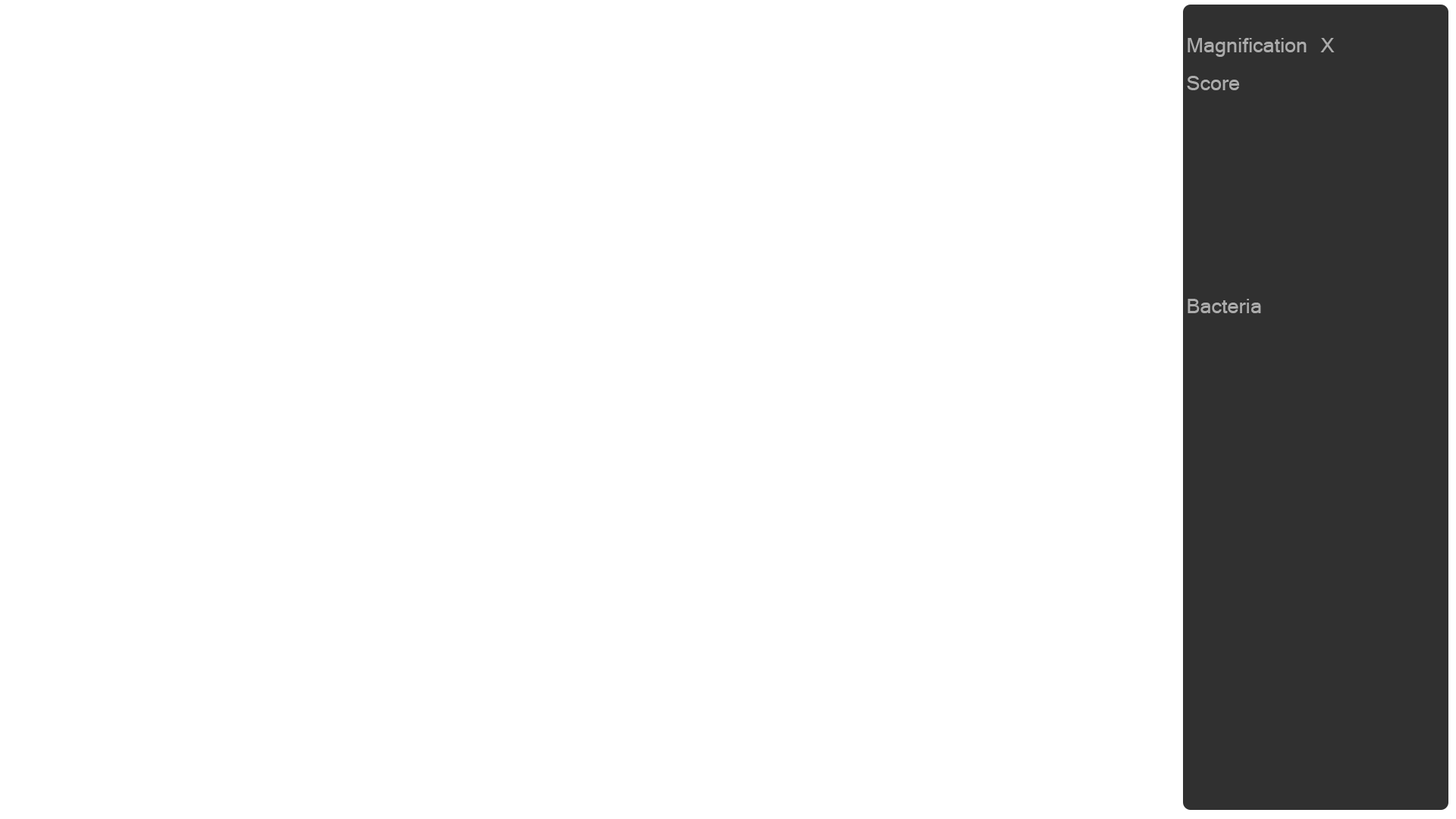
<style>
.page{position:relative;width:1456px;height:819px;background:#ffffff}
.page>*{position:absolute;margin:0}
.t1{font:22.7px "Latha";color:#ababab}
</style>
<div class="page">
<p class="t1" style="left:1188px;top:38px;width:147px;height:19px">Magnification X</p>
<p class="t1" style="left:1187px;top:76px;width:53px;height:14px">Score</p>
<p class="t1" style="left:1188px;top:299px;width:73px;height:14px">Bacteria</p>
</div>
